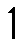
<style>
.page{position:relative;width:24px;height:40px;background:#ffffff}
.page>*{position:absolute;margin:0}
.t1{font:45px "Tuffy";color:#000000}
</style>
<div class="page">
<p class="t1" style="left:8px;top:7px;width:7px;height:32px">1</p>
</div>
